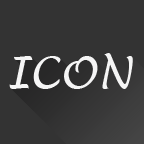
<style>
.page{position:relative;width:144px;height:144px;background:#333333}
.page>*{position:absolute;margin:0}
.t1{font:43px "LucidaHandwriting-Italic";color:#f5f5f5}
</style>
<div class="page">
<p class="t1" style="left:9px;top:53px;width:124px;height:36px">ICON</p>
</div>
